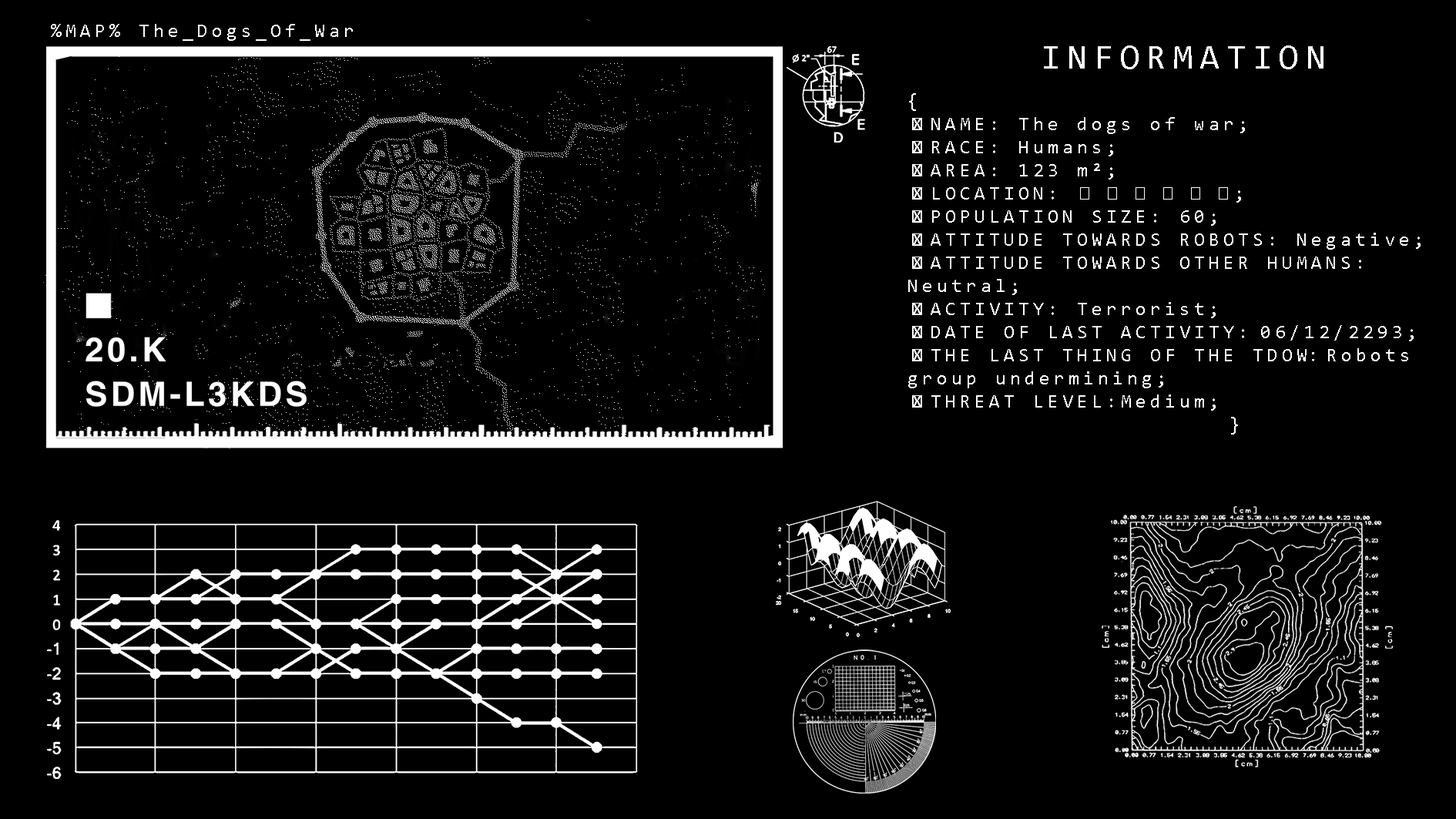
<style>
.page{position:relative;width:1456px;height:819px;background:#000000}
.page>*{position:absolute;margin:0}
.t1{font:19.3px "Consolas";letter-spacing:0.2em;color:#ffffff}
.t2{font:35.3px "Consolas";letter-spacing:0.2em;color:#ffffff}
.t3{font:19.3px "EmojiOneColor";letter-spacing:0.2em;color:#ffffff}
.t4{font:19.3px "CenturyGothic";letter-spacing:0.2em;color:#ffffff}
.t5{font:19.3px "MyriadPro-Regular";letter-spacing:0.2em;color:#ffffff}
</style>
<div class="page">
<p class="t1" style="left:51px;top:24px;width:302px;height:17px">%MAP% The_Dogs_Of_War</p>
<p class="t2" style="left:1044px;top:45px;width:280px;height:24px">INFORMATION</p>
<p class="t1" style="left:908px;top:93px;width:513px;height:342px">{<br><span class="t3">❑</span>NAME: The dogs of war;<br><span class="t3">❑</span>RACE: Humans;<br><span class="t3">❑</span>AREA: 123 m²;<br><span class="t3">❑</span>LOCATION: <span class="t4">⬛ ⬛ ⬛ ⬛ ⬛ ⬛</span>;<br><span class="t3">❑</span>POPULATION SIZE: 60;<br><span class="t3">❑</span>ATTITUDE TOWARDS ROBOTS: Negative;<br><span class="t3">❑</span>ATTITUDE TOWARDS OTHER HUMANS: <br>Neutral;<br><span class="t3">❑</span>ACTIVITY: Terrorist;<br><span class="t3">❑</span>DATE OF LAST ACTIVITY: 06/12/2293;<br><span class="t3">❑</span>THE LAST THING OF THE TDOW<span class="t5">: </span>Robots group undermining;<br><span class="t3">❑</span>THREAT LEVEL:Medium;<br>                      }</p>
</div>
